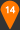
<style>
.page{position:relative;width:20px;height:30px;background:#ff7800}
.page>*{position:absolute;margin:0}
.t1{font:9px "OpenSans";color:#ffffff;font-weight:bold}
</style>
<div class="page">
<p class="t1" style="left:5px;top:6px;width:11px;height:8px">14</p>
</div>
